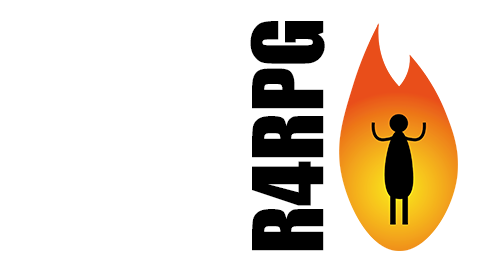
<style>
.page{position:relative;width:480px;height:272px;background:#ffffff}
.page>*{position:absolute;margin:0}
.t1{font:90px "Impact";color:#000000}
</style>
<div class="page">
<p class="t1" style="left:250px;top:21px;width:75px;height:230px;rotate:-90deg">R4RPG</p>
</div>
